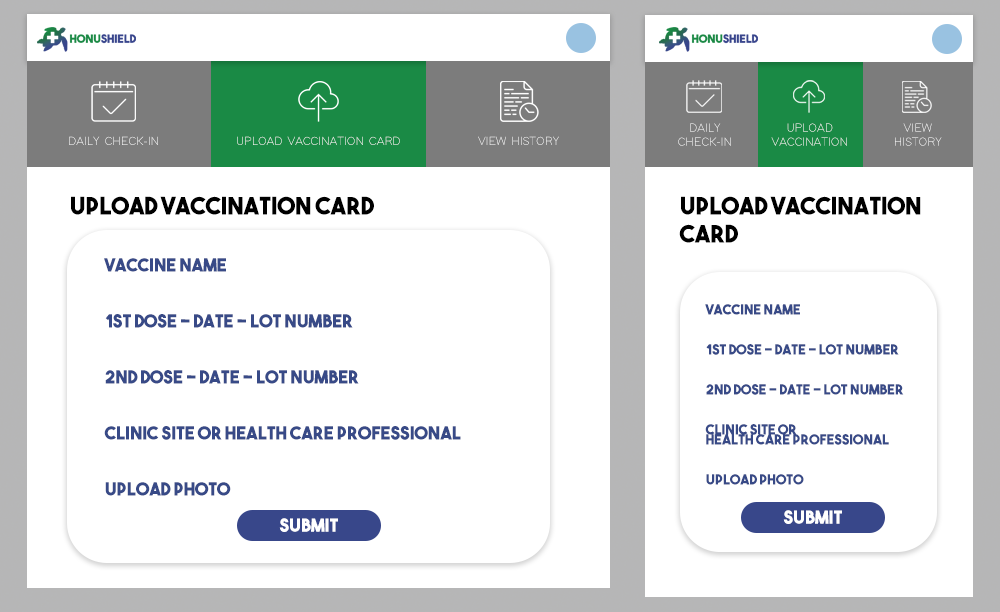
<style>
.page{position:relative;width:1000px;height:612px;background:#ffffff}
.page>*{position:absolute;margin:0}
.t1{font:12px/14px "ModernSansLight"}
.t2{font:12px "ModernSansLight"}
.t3{font:24px "TheBoldFont";color:#000000}
.t4{font:24px/14px "TheBoldFont";color:#000000}
.t5{font:18px/14px "TheBoldFont";color:#384a87}
.t6{font:14px/10px "TheBoldFont";color:#384a87}
.t7{font:18px "TheBoldFont";color:#ffffff}
</style>
<div class="page">
<p class="t1" style="left:678px;top:123px;width:53px;height:23px;text-align:center">DAILY<br>CHECK-IN</p>
<p class="t1" style="left:771px;top:123px;width:76px;height:23px;text-align:center">UPLOAD<br>VACCINATION</p>
<p class="t1" style="left:895px;top:123px;width:47px;height:23px;text-align:center">VIEW<br>HISTORY</p>
<p class="t2" style="left:69px;top:136px;width:490px;height:9px">DAILY CHECK-IN               UPLOAD VACCINATION CARD               VIEW HISTORY</p>
<p class="t3" style="left:71px;top:196px;width:303px;height:19px">UPLOAD VACCINATION CARD</p>
<p class="t4" style="left:679px;top:196px;width:242px;height:47px">UPLOAD VACCINATION <br><br>CARD</p>
<p class="t5" style="left:104px;top:258px;width:357px;height:238px">Vaccine Name<br><br><br><br>1st dose - DATE - lot number<br><br><br><br>2nd dose - DATE - LOT NUMBER<br><br><br><br>CLINIC SITE OR Health Care Professional<br><br><br><br>UPLOAD PHOTO</p>
<p class="t6" style="left:705px;top:304px;width:199px;height:181px">Vaccine Name<br><br><br><br>1st dose - DATE - lot number<br><br><br><br>2nd dose - DATE - LOT NUMBER<br><br><br><br>CLINIC SITE OR <br>Health Care Professional<br><br><br><br>UPLOAD PHOTO</p>
<p class="t7" style="left:783px;top:510px;width:59px;height:14px">SUBMIT</p>
<p class="t7" style="left:279px;top:518px;width:59px;height:14px">SUBMIT</p>
</div>
